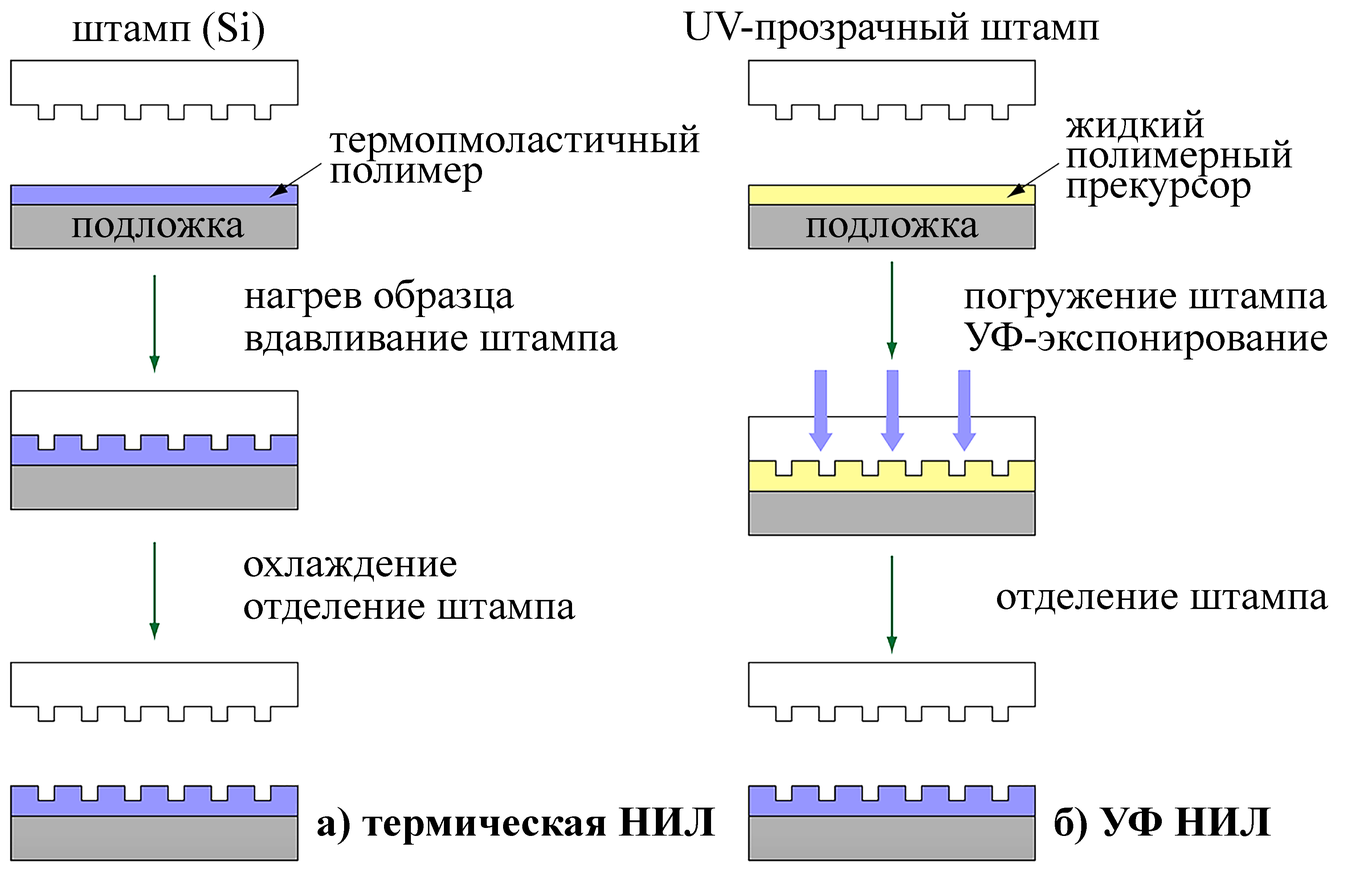
<style>
.page{position:relative;width:1372px;height:869px;background:#ffffff}
.page>*{position:absolute;margin:0}
.t1{font:42.4px "TimesNewRomanPSMT";color:#000000}
.t2{font:42.4px/30.3px "TimesNewRomanPSMT";color:#000000}
.t3{font:42.4px/30.2px "TimesNewRomanPSMT";color:#000000}
.t4{font:42.4px/42.4px "TimesNewRomanPSMT";color:#000000}
.t5{font:42.4px "TimesNewRomanPS-BoldMT";color:#000000}
</style>
<div class="page">
<p class="t1" style="left:73px;top:12px;width:191px;height:38px">штамп (Si)</p>
<p class="t1" style="left:683px;top:12px;width:416px;height:37px">UV-прозрачный штамп</p>
<p class="t2" style="left:1066px;top:110px;width:227px;height:97px">жидкий<br>полимерный<br>прекурсор</p>
<p class="t3" style="left:330px;top:125px;width:370px;height:67px">термопмоластичный<br>полимер</p>
<p class="t1" style="left:72px;top:218px;width:172px;height:25px">подложка</p>
<p class="t1" style="left:806px;top:218px;width:173px;height:25px">подложка</p>
<p class="t4" style="left:245px;top:278px;width:373px;height:78px">нагрев образца<br>вдавливание штампа</p>
<p class="t4" style="left:964px;top:289px;width:363px;height:70px">погружение штампа<br>УФ-экспонирование</p>
<p class="t4" style="left:244px;top:557px;width:331px;height:67px">охлаждение<br>отделение штампа</p>
<p class="t1" style="left:997px;top:590px;width:332px;height:24px">отделение штампа</p>
<p class="t5" style="left:318px;top:807px;width:397px;height:38px">a) термическая НИЛ</p>
<p class="t5" style="left:1055px;top:807px;width:216px;height:38px">б) УФ НИЛ</p>
</div>
